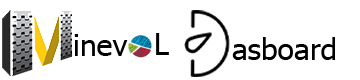
<style>
.page{position:relative;width:360px;height:80px;background:#ffffff}
.page>*{position:absolute;margin:0}
.t1{font:30px "Tahoma";color:#000000}
</style>
<div class="page">
<p class="t1" style="left:74px;top:34px;width:54px;height:22px">inev</p>
<p class="t1" style="left:156px;top:33px;width:13px;height:22px">L</p>
<p class="t1" style="left:232px;top:37px;width:103px;height:23px">asboard</p>
</div>
